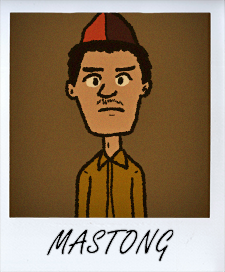
<style>
.page{position:relative;width:225px;height:272px}
.page>*{position:absolute;margin:0}
.t1{font:36px "FreestyleScript-Regular";font-weight:bold}
</style>
<div class="page">
<p class="t1" style="left:46px;top:228px;width:128px;height:34px">MASTONG</p>
</div>
